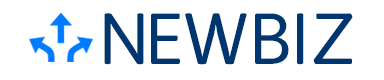
<style>
.page{position:relative;width:384px;height:80px;background:#ffffff}
.page>*{position:absolute;margin:0}
.t1{font:72.2px "Asap-Regular";color:#00366f;text-transform:uppercase}
.t2{font:72.2px "Asap-Regular";letter-spacing:-0.075em;color:#00366f;text-transform:uppercase}
</style>
<div class="page">
<p class="t1" style="left:104px;top:13px;width:249px;height:52px"><span class="t2">N</span>ewBiz</p>
</div>
